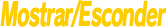
<style>
.page{position:relative;width:166px;height:28px;background:#ffffff}
.page>*{position:absolute;margin:0}
.t1{font:32px "RodinPro-EB";letter-spacing:-0.061em;color:#fecd00;font-style:italic;scale:0.61 1}
</style>
<div class="page">
<p class="t1" style="left:0px;top:0px;width:166px;height:27px">Mostrar/Esconder</p>
</div>
